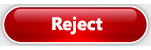
<style>
.page{position:relative;width:151px;height:50px}
.page>*{position:absolute;margin:0}
.t1{font:18px "NirmalaUI-Bold";color:#f3f7f7}
</style>
<div class="page">
<p class="t1" style="left:52px;top:16px;width:51px;height:19px">Reject</p>
</div>
